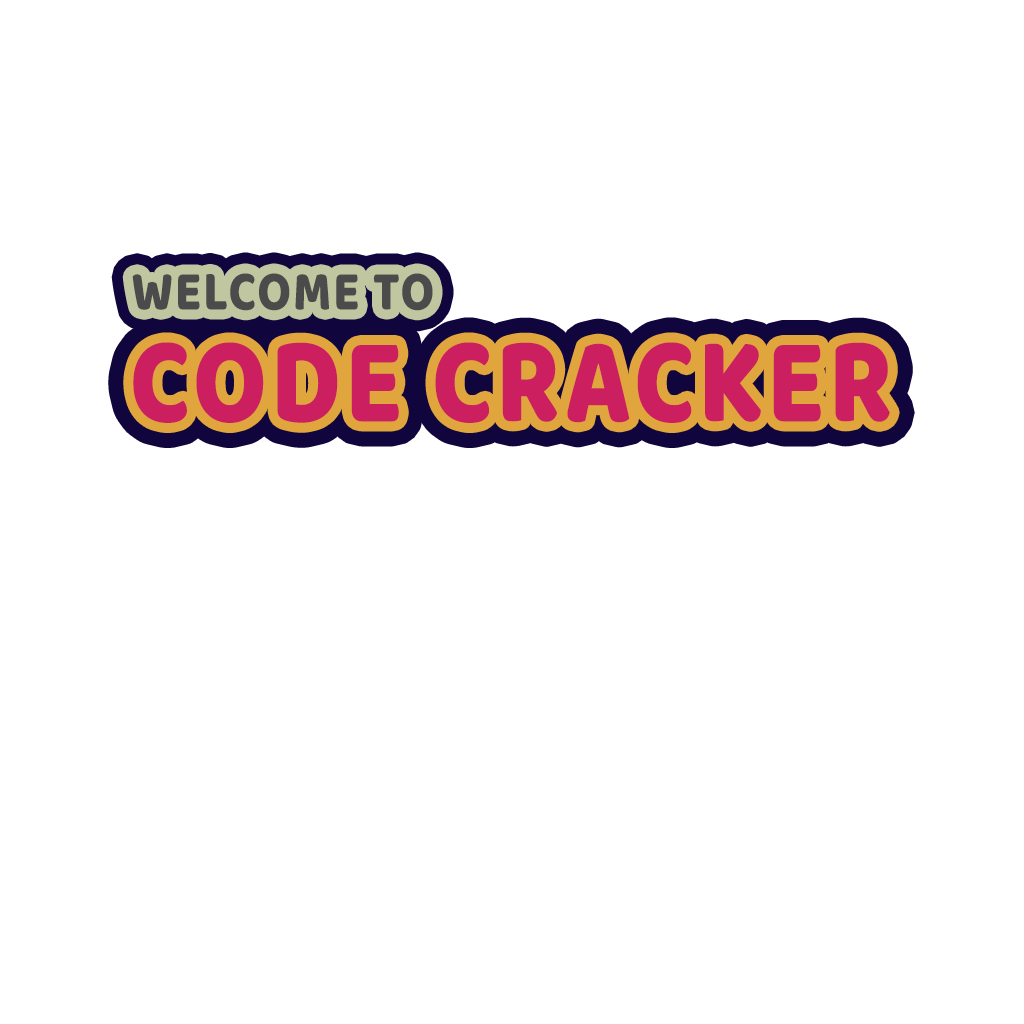
<style>
.page{position:relative;width:1024px;height:1024px;background:#ffffff}
.page>*{position:absolute;margin:0}
.t1{font:57.3px "Baloo-Regular";letter-spacing:0.04em;color:#4b4b4b;scale:0.84 1}
.t2{font:125px "Baloo-Regular";letter-spacing:0.04em;color:#cb1f60;scale:0.84 1}
</style>
<div class="page">
<p class="t1" style="left:132px;top:273px;width:301px;height:38px">WELCOME TO</p>
<p class="t2" style="left:133px;top:342px;width:757px;height:81px">CODE CRACKER</p>
</div>
